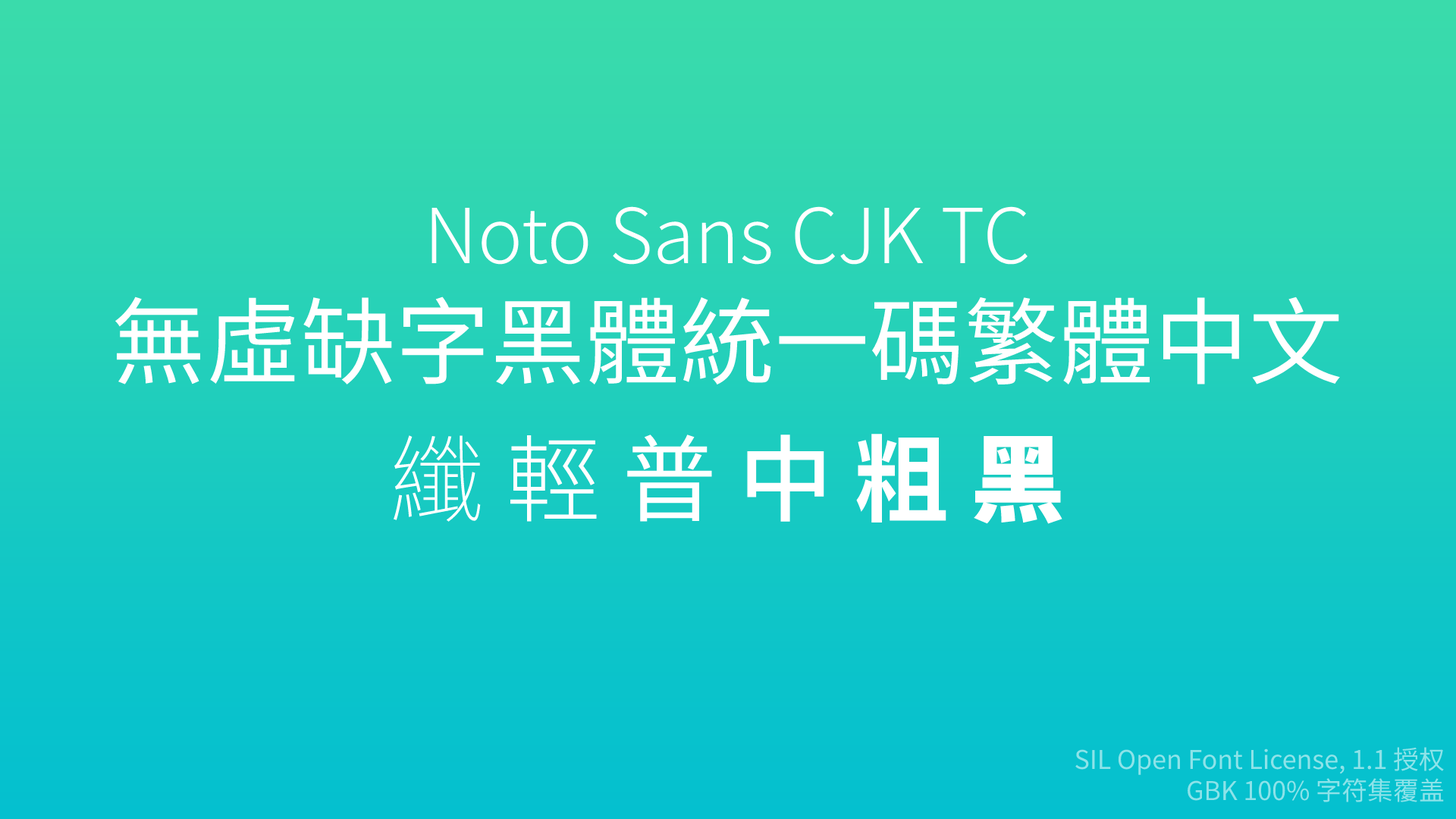
<style>
.page{position:relative;width:1456px;height:819px}
.page>*{position:absolute;margin:0}
.t1{font:75.8px "NotoSansCJKtc-Light";color:#ffffff}
.t2{font:94.8px "NotoSansCJKtc-Regular";color:#ffffff}
.t3{font:94.8px "NotoSansCJKtc-Thin";color:#ffffff}
.t4{font:94.8px "NotoSansCJKtc-Light";color:#ffffff}
.t5{font:94.8px "NotoSansCJKtc-Medium";color:#ffffff}
.t6{font:94.8px "NotoSansCJKtc-Bold";color:#ffffff}
.t7{font:94.8px "NotoSansCJKtc-Black";color:#ffffff}
.t8{font:25.8px "NotoSansCJKtc-Regular";color:#8de3e9}
</style>
<div class="page">
<p class="t1" style="left:115px;top:206px;width:1225px;height:179px;text-align:center">Noto Sans CJK TC<br><span class="t2">無虛缺字黑體統一碼繁體中文</span></p>
<p class="t3" style="left:394px;top:434px;width:668px;height:90px">纖 <span class="t4">輕 </span><span class="t2">普 </span><span class="t5">中 </span><span class="t6">粗 </span><span class="t7">黑</span></p>
<p class="t8" style="left:1075px;top:747px;width:369px;height:55px;text-align:right">SIL Open Font License, 1.1 授权<br> GBK 100% 字符集覆盖</p>
</div>
